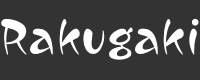
<style>
.page{position:relative;width:200px;height:80px;background:#333333}
.page>*{position:absolute;margin:0}
.t1{font:41.8px "PreMomoStd-Bold";color:#ffffff}
</style>
<div class="page">
<p class="t1" style="left:1px;top:18px;width:198px;height:42px">Rakugaki</p>
</div>
